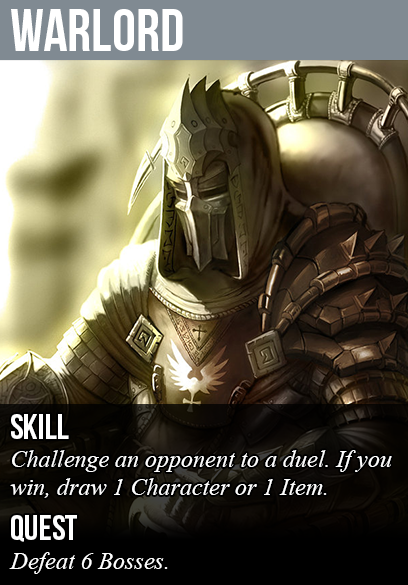
<style>
.page{position:relative;width:408px;height:585px}
.page>*{position:absolute;margin:0}
.t1{font:60px "BebasNeue";color:#ffffff}
.t2{font:36px "BebasNeue";color:#ffffff}
.t3{font:24px "TimesNewRomanPS-ItalicMT";color:#ffffff}
</style>
<div class="page">
<p class="t1" style="left:11px;top:9px;width:172px;height:42px">warlord</p>
<p class="t2" style="left:11px;top:414px;width:58px;height:25px">skill</p>
<p class="t3" style="left:10px;top:450px;width:382px;height:48px">Challenge an opponent to a duel. If you<br>win, draw 1 Character or 1 Item.</p>
<p class="t2" style="left:11px;top:515px;width:66px;height:27px">quest</p>
<p class="t3" style="left:9px;top:552px;width:159px;height:22px">Defeat 6 Bosses.</p>
</div>
